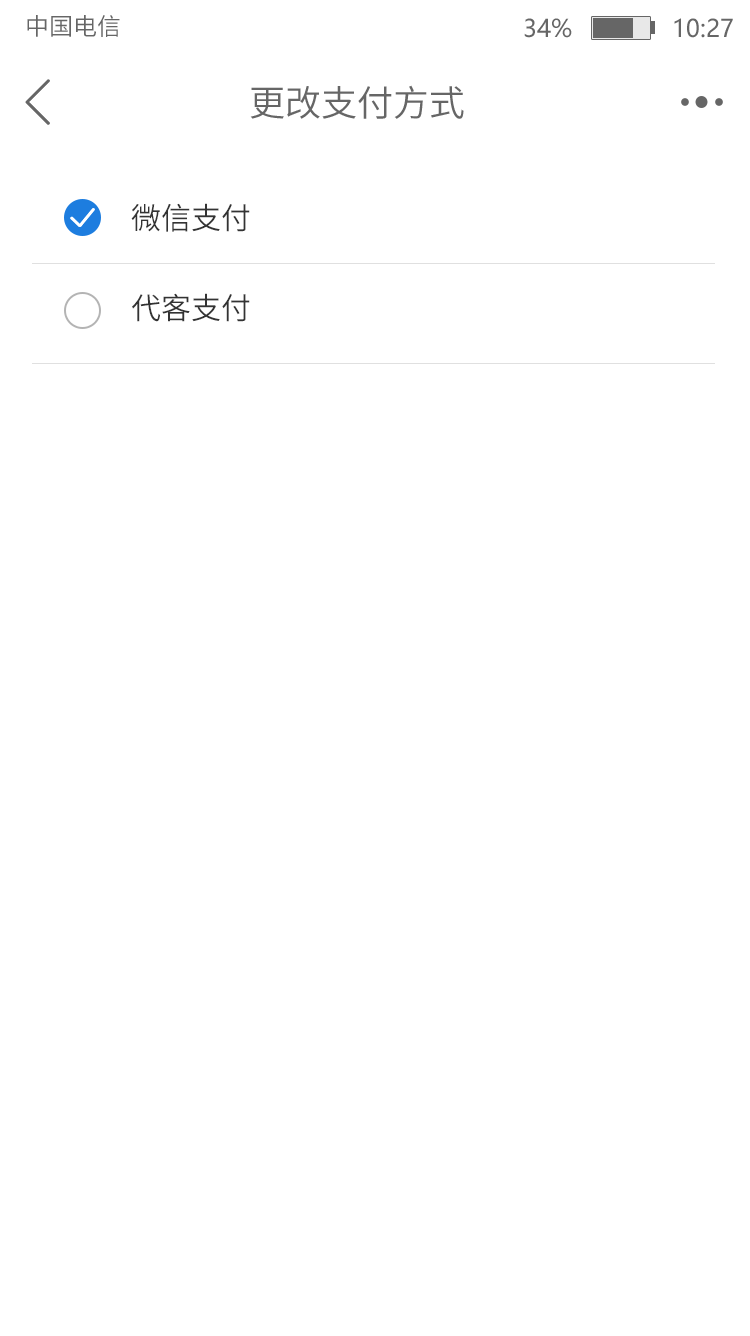
<style>
.page{position:relative;width:750px;height:1336px;background:#ffffff}
.page>*{position:absolute;margin:0}
.t1{font:24px "SourceHanSansCN-Normal";color:#666666}
.t2{font:24px "MicrosoftYaHei";color:#666666}
.t3{font:36px "SourceHanSansCN-Normal";color:#666666}
.t4{font:30px/90px "SourceHanSansCN-Normal";color:#333333}
</style>
<div class="page">
<p class="t1" style="left:27px;top:15px;width:93px;height:22px">中国电信</p>
<p class="t2" style="left:524px;top:18px;width:209px;height:20px">34%              10:27</p>
<p class="t3" style="left:250px;top:85px;width:214px;height:34px">更改支付方式</p>
<p class="t4" style="left:131px;top:203px;width:119px;height:119px">微信支付<br>代客支付</p>
</div>
